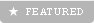
<style>
.page{position:relative;width:94px;height:23px;background:#b6b5b5}
.page>*{position:absolute;margin:0}
.t1{font:10px "Georgia";color:#ffffff}
</style>
<div class="page">
<p class="t1" style="left:26px;top:8px;width:57px;height:7px">FEATURED</p>
</div>
